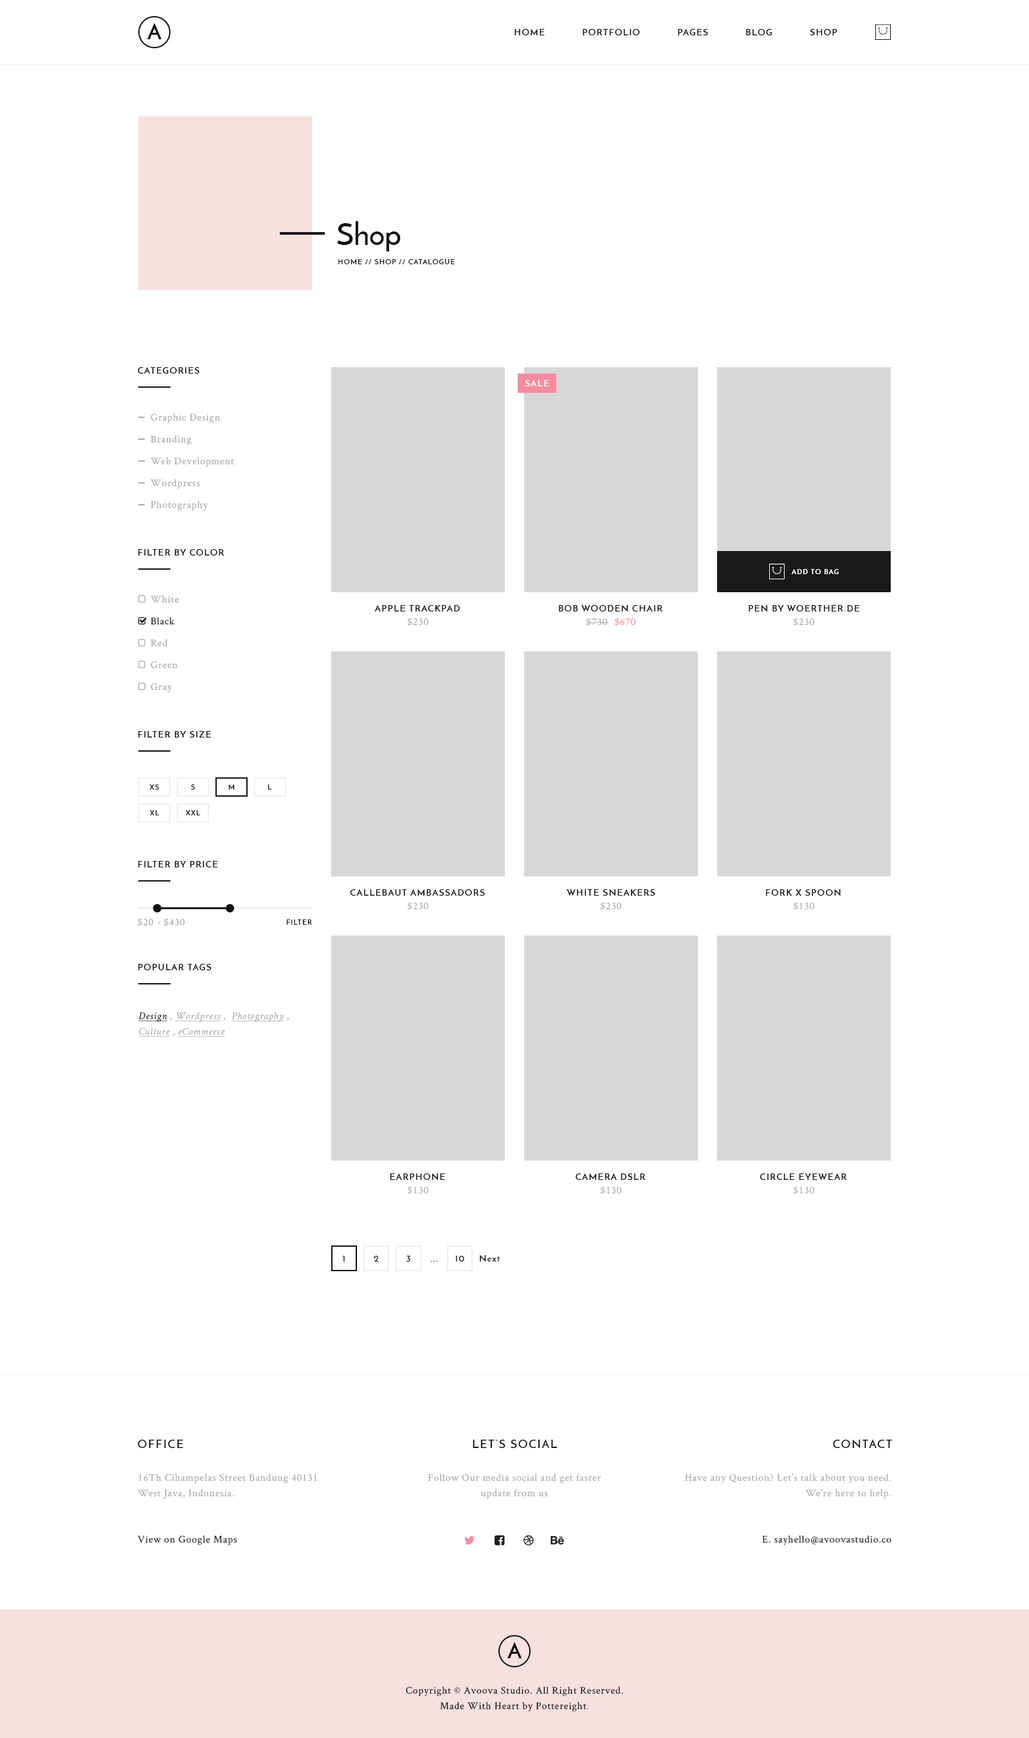
<style>
.page{position:relative;width:1029px;height:1738px;background:#ffffff}
.page>*{position:absolute;margin:0}
.t1{font:21.9px "JosefinSans-Bold";letter-spacing:0.5em;color:#121212;text-transform:uppercase}
.t2{font:9px "JosefinSans-SemiBold";letter-spacing:0.1em;color:#121212;text-transform:uppercase}
.t3{font:30.9px "JosefinSans-SemiBold";color:#121212}
.t4{font:7.1px "JosefinSans-SemiBold";letter-spacing:0.1em;color:#121212;text-transform:uppercase}
.t5{font:9px "JosefinSans-SemiBold";letter-spacing:0.1em;color:#ffffff;text-transform:uppercase}
.t6{font:10.3px "CrimsonText-Roman";letter-spacing:0.05em;color:#ababab}
.t7{font:7.1px "JosefinSans-Bold";letter-spacing:0.1em;color:#ffffff;text-transform:uppercase}
.t8{font:10.3px "CrimsonText-Roman";letter-spacing:0.05em;color:#121212}
.t9{font:10.3px "CrimsonText-Roman";letter-spacing:0.05em;color:#f68c9d}
.t10{font:10.3px/15.4px "CrimsonText-Italic";letter-spacing:0.05em;color:#ababab;text-decoration:underline}
.t11{font:10.3px/15.4px "CrimsonText-Italic";letter-spacing:0.05em;color:#121212;text-decoration:underline}
.t12{font:10.3px/15.4px "CrimsonText-Italic";letter-spacing:0.05em;color:#ababab}
.t13{font:9px "JosefinSans-SemiBold";letter-spacing:0.1em;color:#121212}
.t14{font:11.6px "JosefinSans-SemiBold";letter-spacing:0.1em;color:#121212;text-transform:uppercase}
.t15{font:10.3px/15.4px "CrimsonText-Roman";letter-spacing:0.05em;color:#ababab}
.t16{font:10.3px/15.4px "CrimsonText-Roman";letter-spacing:0.05em;color:#121212}
</style>
<div class="page">
<p class="t1" style="left:147px;top:22px;width:15px;height:17px">a</p>
<p class="t2" style="left:514px;top:28px;width:30px;height:7px">Home</p>
<p class="t2" style="left:582px;top:29px;width:58px;height:6px">Portfolio</p>
<p class="t2" style="left:678px;top:29px;width:30px;height:6px">Pages</p>
<p class="t2" style="left:746px;top:29px;width:25px;height:6px">Blog</p>
<p class="t2" style="left:809px;top:29px;width:28px;height:6px">Shop</p>
<p class="t3" style="left:337px;top:221px;width:64px;height:30px">Shop</p>
<p class="t4" style="left:338px;top:258px;width:117px;height:6px">Home // Shop // cATALOGUE</p>
<p class="t2" style="left:138px;top:367px;width:61px;height:7px">Categories</p>
<p class="t5" style="left:525px;top:380px;width:24px;height:6px">Sale</p>
<p class="t6" style="left:150px;top:413px;width:70px;height:10px">Graphic Design</p>
<p class="t6" style="left:150px;top:435px;width:42px;height:10px">Branding</p>
<p class="t6" style="left:150px;top:457px;width:84px;height:10px">Web Development</p>
<p class="t6" style="left:150px;top:479px;width:50px;height:10px">Wordpress</p>
<p class="t6" style="left:150px;top:501px;width:58px;height:9px">Photography</p>
<p class="t2" style="left:138px;top:549px;width:86px;height:6px">Filter by Color</p>
<p class="t7" style="left:791px;top:569px;width:47px;height:5px">Add to bag</p>
<p class="t6" style="left:150px;top:595px;width:29px;height:8px">White</p>
<p class="t2" style="left:374px;top:605px;width:86px;height:6px">Apple Trackpad</p>
<p class="t2" style="left:559px;top:604px;width:103px;height:8px">Bob Wooden Chair</p>
<p class="t2" style="left:748px;top:604px;width:112px;height:8px">Pen by woerther.de</p>
<p class="t8" style="left:150px;top:617px;width:25px;height:8px">Black</p>
<p class="t6" style="left:408px;top:618px;width:21px;height:8px">$230</p>
<p class="t6" style="left:586px;top:618px;width:22px;height:8px">$730</p>
<p class="t9" style="left:615px;top:618px;width:21px;height:8px">$670</p>
<p class="t6" style="left:793px;top:618px;width:22px;height:8px">$230</p>
<p class="t6" style="left:150px;top:639px;width:18px;height:8px">Red</p>
<p class="t6" style="left:150px;top:661px;width:27px;height:8px">Green</p>
<p class="t6" style="left:150px;top:683px;width:22px;height:9px">Gray</p>
<p class="t2" style="left:138px;top:730px;width:73px;height:7px">Filter by Size</p>
<p class="t4" style="left:149px;top:784px;width:10px;height:5px">XS</p>
<p class="t4" style="left:191px;top:784px;width:4px;height:5px">S</p>
<p class="t4" style="left:228px;top:784px;width:7px;height:5px">M</p>
<p class="t4" style="left:267px;top:784px;width:5px;height:5px">L</p>
<p class="t4" style="left:150px;top:810px;width:9px;height:5px">XL</p>
<p class="t4" style="left:186px;top:810px;width:15px;height:5px">XXL</p>
<p class="t2" style="left:138px;top:861px;width:80px;height:6px">Filter by Price</p>
<p class="t2" style="left:350px;top:888px;width:135px;height:8px">Callebaut Ambassadors</p>
<p class="t2" style="left:566px;top:888px;width:89px;height:8px">White Sneakers</p>
<p class="t2" style="left:766px;top:888px;width:74px;height:8px">Fork X Spoon</p>
<p class="t6" style="left:408px;top:902px;width:21px;height:8px">$230</p>
<p class="t6" style="left:600px;top:902px;width:22px;height:8px">$230</p>
<p class="t6" style="left:793px;top:902px;width:22px;height:8px">$130</p>
<p class="t6" style="left:138px;top:918px;width:47px;height:8px">$20 - $430</p>
<p class="t4" style="left:286px;top:919px;width:26px;height:5px">Filter</p>
<p class="t2" style="left:138px;top:964px;width:74px;height:6px">Popular Tags</p>
<p class="t10" style="left:138px;top:1012px;width:151px;height:25px"><span class="t11">Design </span><span class="t12">, </span>Wordpress<span class="t12"> ,  </span>Photography<span class="t12"> , </span>Culture<span class="t12"> , </span>eCommerce</p>
<p class="t2" style="left:390px;top:1173px;width:55px;height:7px">Earphone</p>
<p class="t2" style="left:575px;top:1173px;width:70px;height:7px">Camera DSLR</p>
<p class="t2" style="left:759px;top:1173px;width:88px;height:7px">Circle Eyewear</p>
<p class="t6" style="left:408px;top:1186px;width:21px;height:8px">$130</p>
<p class="t6" style="left:600px;top:1186px;width:22px;height:8px">$130</p>
<p class="t6" style="left:793px;top:1186px;width:22px;height:8px">$130</p>
<p class="t2" style="left:343px;top:1256px;width:2px;height:5px">1</p>
<p class="t2" style="left:374px;top:1256px;width:5px;height:5px">2</p>
<p class="t2" style="left:406px;top:1256px;width:4px;height:5px">3</p>
<p class="t2" style="left:430px;top:1261px;width:8px;height:0px">...</p>
<p class="t2" style="left:455px;top:1256px;width:9px;height:5px">10</p>
<p class="t13" style="left:480px;top:1254px;width:20px;height:8px">Next</p>
<p class="t14" style="left:138px;top:1439px;width:45px;height:9px">Office</p>
<p class="t14" style="left:473px;top:1439px;width:84px;height:9px">Let’s Social</p>
<p class="t14" style="left:833px;top:1439px;width:59px;height:9px">Contact</p>
<p class="t15" style="left:138px;top:1473px;width:179px;height:25px">16Th Cihampelas Street Bandung 40131<br>West Java, Indonesia.</p>
<p class="t15" style="left:428px;top:1473px;width:173px;height:25px;text-align:center">Follow Our media social and get faster<br>update from us</p>
<p class="t15" style="left:685px;top:1473px;width:206px;height:25px;text-align:right">Have any Question? Let’s talk about you need.<br>We’re here to help.</p>
<p class="t8" style="left:138px;top:1535px;width:99px;height:10px">View on Google Maps</p>
<p class="t8" style="left:762px;top:1535px;width:129px;height:10px">E. sayhello@avoovastudio.co</p>
<p class="t1" style="left:507px;top:1641px;width:15px;height:17px">a</p>
<p class="t16" style="left:406px;top:1686px;width:217px;height:25px;text-align:center">Copyright © Avoova Studio. All Right Reserved.<br>Made With Heart by Pottereight<span class="t15">.</span></p>
</div>
